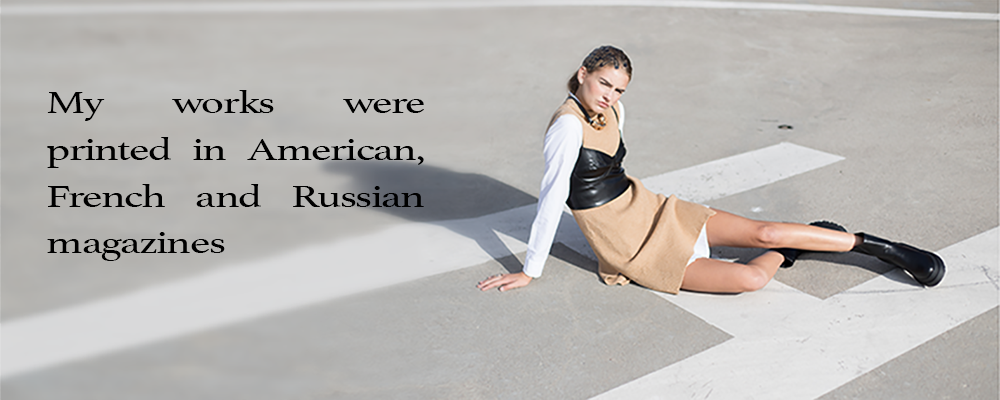
<style>
.page{position:relative;width:1000px;height:400px}
.page>*{position:absolute;margin:0}
.t1{font:33px/46.7px "Athelas-Regular";letter-spacing:-0.04em;color:#000000;scale:1.35 1}
</style>
<div class="page">
<p class="t1" style="left:47px;top:90px;width:377px;height:171px;text-align:justify">My works were printed in American, French and Russian magazines</p>
</div>
